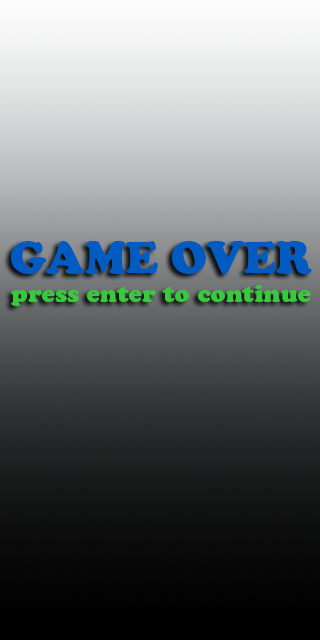
<style>
.page{position:relative;width:320px;height:640px}
.page>*{position:absolute;margin:0}
.t1{font:24px "CooperBlackStd";color:#38ca3c}
.t2{font:44px "CooperBlackStd";color:#015bc1}
</style>
<div class="page">
<p class="t1" style="left:11px;top:241px;width:301px;height:65px;text-align:center"><span class="t2">GAME OVER<br></span>press enter to continue</p>
</div>
